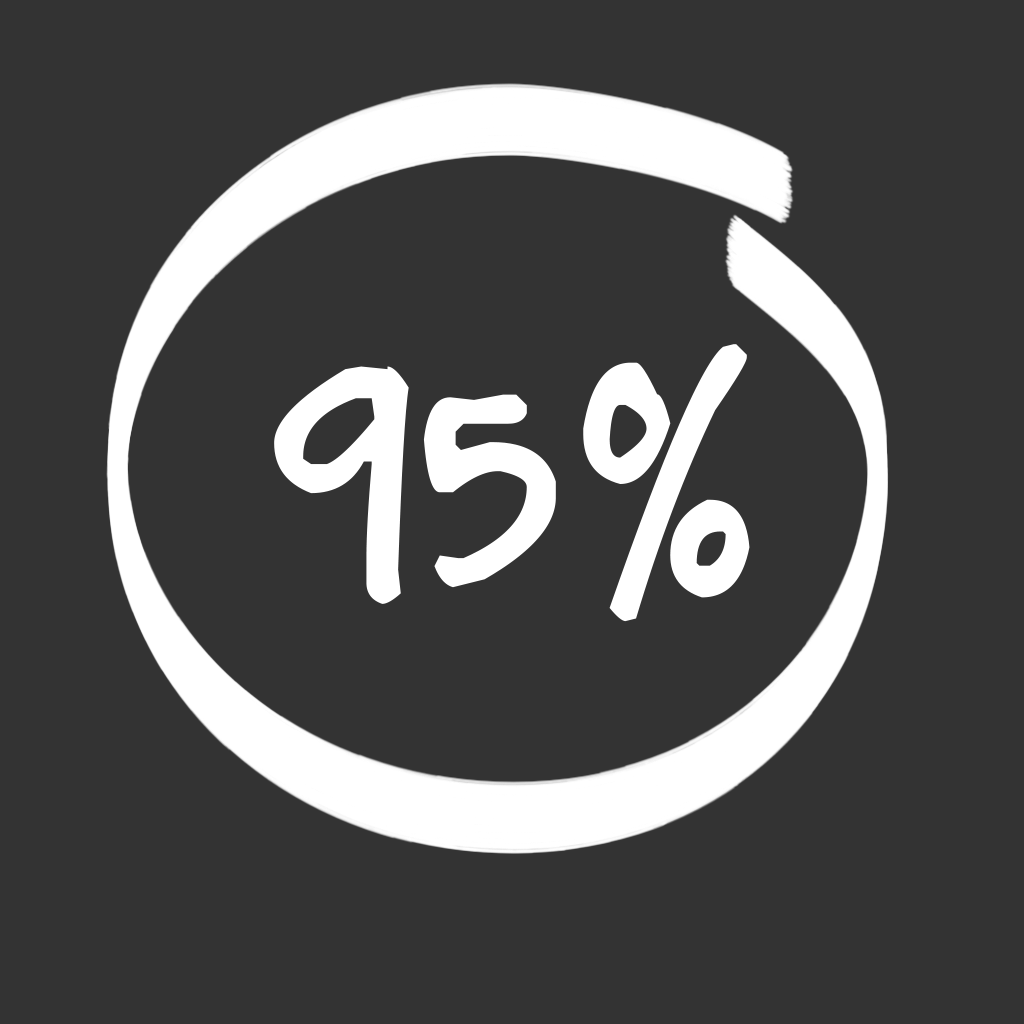
<style>
.page{position:relative;width:1024px;height:1024px;background:#333333}
.page>*{position:absolute;margin:0}
.t1{font:360px "CompleteinHim";color:#ffffff;text-transform:uppercase}
</style>
<div class="page">
<p class="t1" style="left:274px;top:344px;width:476px;height:278px">95%</p>
</div>
